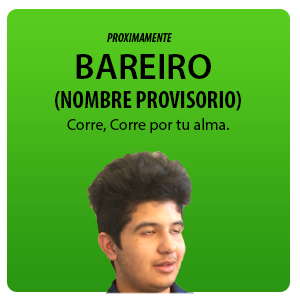
<style>
.page{position:relative;width:300px;height:300px}
.page>*{position:absolute;margin:0}
.t1{font:12px "MyriadPro-BoldCondIt";color:#000000}
.t2{font:36px "MyriadPro-Semibold";color:#000000}
.t3{font:24px "MyriadPro-BoldCond";color:#000000}
.t4{font:16px "MyriadPro-Regular";color:#000000}
</style>
<div class="page">
<p class="t1" style="left:107px;top:33px;width:65px;height:9px">PROXIMAMENTE</p>
<p class="t2" style="left:76px;top:54px;width:135px;height:25px">BAREIRO</p>
<p class="t3" style="left:55px;top:91px;width:186px;height:20px">(NOMBRE PROVISORIO)</p>
<p class="t4" style="left:67px;top:118px;width:162px;height:15px">Corre, Corre por tu alma.</p>
</div>
